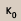
<style>
.page{position:relative;width:21px;height:21px;background:#d9cdc1}
.page>*{position:absolute;margin:0}
.t1{font:9px "Tahoma";color:#000000}
.t2{font:8px "Tahoma";color:#000000}
</style>
<div class="page">
<p class="t1" style="left:6px;top:7px;width:6px;height:7px">K</p>
<p class="t2" style="left:12px;top:12px;width:5px;height:7px">0</p>
</div>
